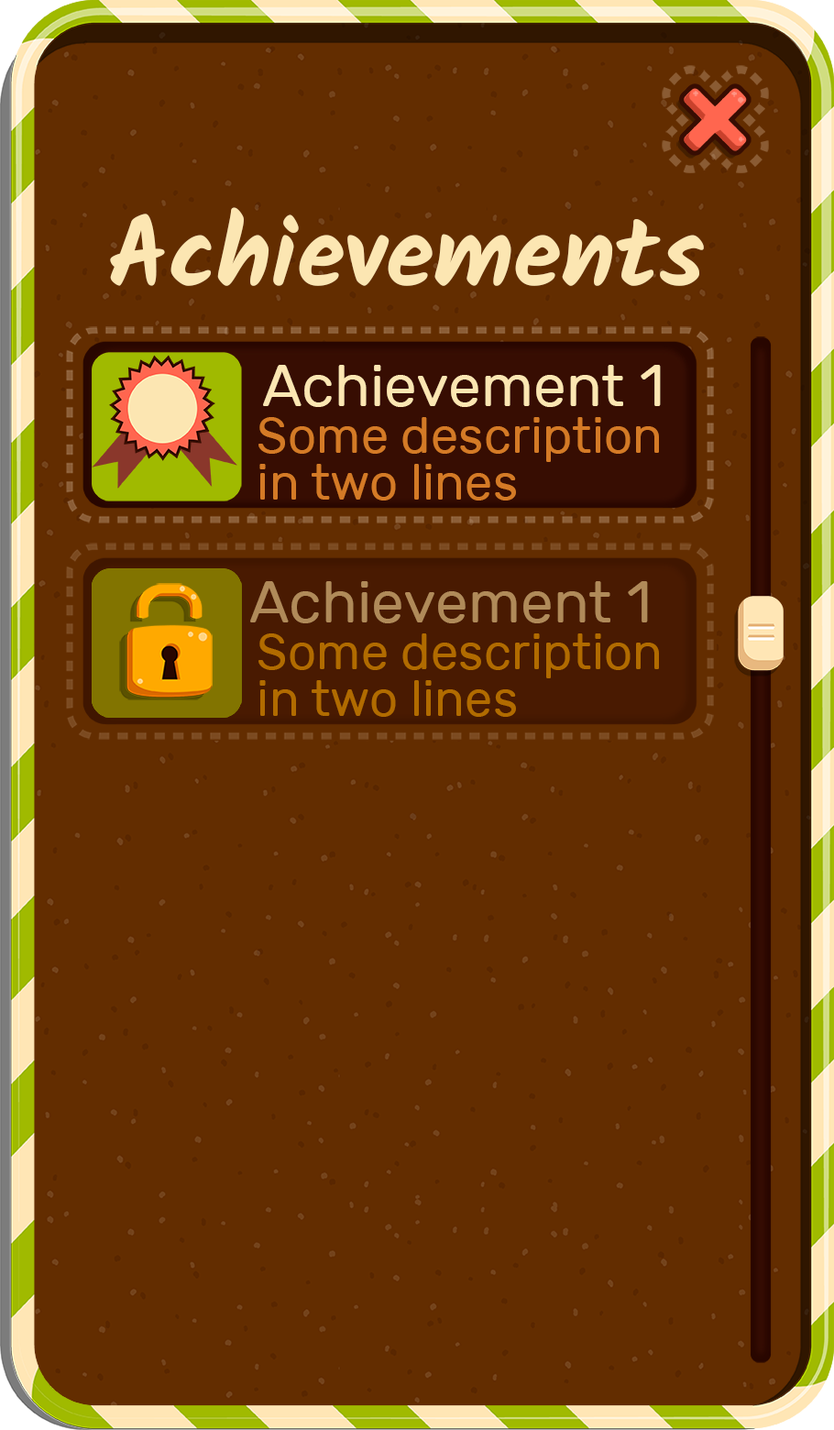
<style>
.page{position:relative;width:834px;height:1430px;background:#632d00}
.page>*{position:absolute;margin:0}
.t1{font:97.8px "Kalam-Bold";color:#fce6b2}
.t2{font:59px "Rubik-Regular";color:#fce6b2}
.t3{font:50px/47.2px "Rubik-Regular";color:#d47a26}
.t4{font:59px "Rubik-Regular";color:#b08a59}
.t5{font:50px/47.2px "Rubik-Regular";color:#b16b00}
</style>
<div class="page">
<p class="t1" style="left:110px;top:207px;width:594px;height:79px">Achievements</p>
<p class="t2" style="left:263px;top:365px;width:398px;height:42px">Achievement 1</p>
<p class="t3" style="left:258px;top:417px;width:401px;height:83px">Some description<br>in two lines</p>
<p class="t4" style="left:250px;top:581px;width:398px;height:42px">Achievement 1</p>
<p class="t5" style="left:258px;top:633px;width:401px;height:84px">Some description<br>in two lines</p>
</div>
